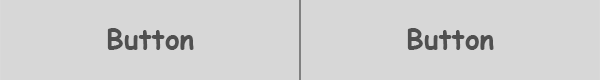
<style>
.page{position:relative;width:600px;height:80px;background:#d7d7d7}
.page>*{position:absolute;margin:0}
.t1{font:28px "ComicSansMS-Bold";color:#505050}
</style>
<div class="page">
<p class="t1" style="left:107px;top:28px;width:87px;height:22px">Button</p>
<p class="t1" style="left:407px;top:28px;width:87px;height:22px">Button</p>
</div>
